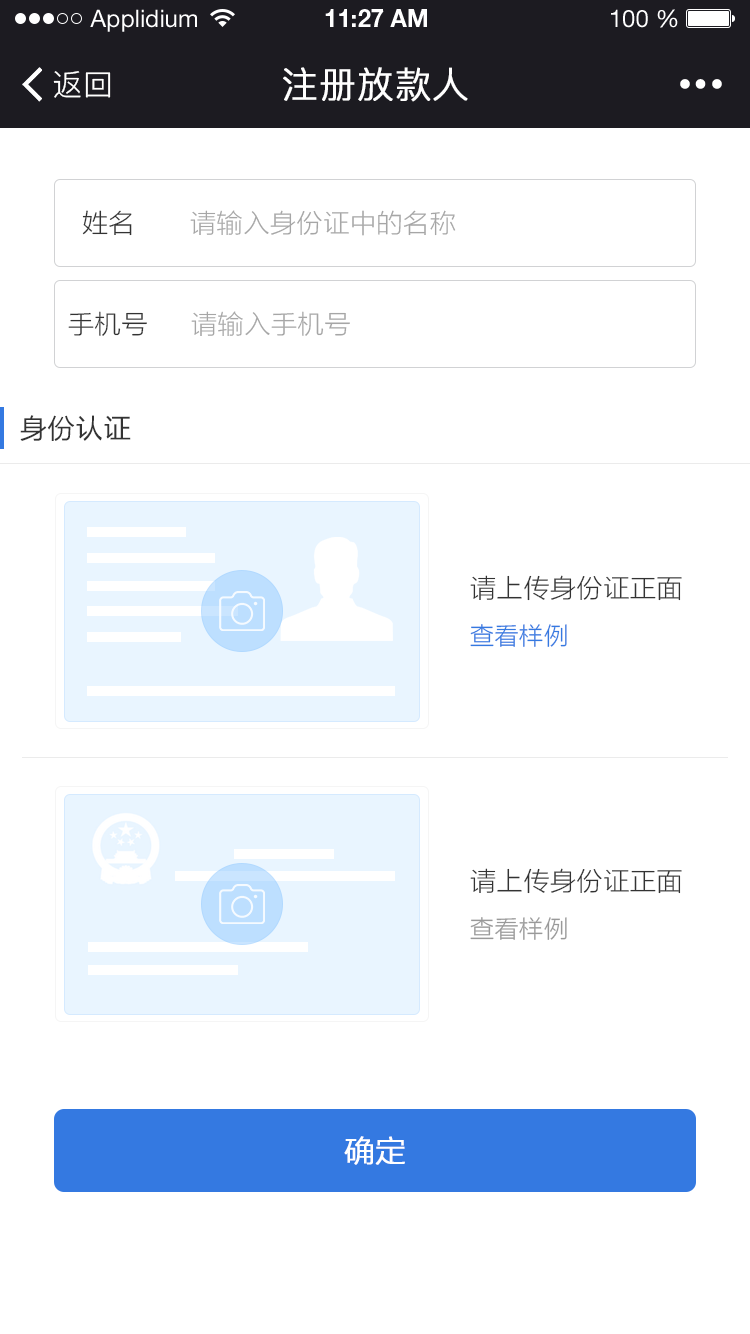
<style>
.page{position:relative;width:750px;height:1334px;background:#ffffff}
.page>*{position:absolute;margin:0}
.t1{font:24px "HelveticaNeueLTStd-Roman";color:#ffffff}
.t2{font:24px "HelveticaNeueLTStd-Bd";color:#ffffff}
.t3{font:30px "PingFang-SC-Regular";letter-spacing:0.025em;color:#ffffff}
.t4{font:36px "PingFang-SC-Regular";letter-spacing:0.025em;color:#ffffff;font-weight:bold}
.t5{font:26px "FZLTXHK--GBK1-0";letter-spacing:0.025em;color:#333333}
.t6{font:26px "FZLTXHK--GBK1-0";letter-spacing:0.025em;color:#a6a6a6}
.t7{font:28px "FZLTH_YS_GBK";color:#333333}
.t8{font:24px "FZLTXHK--GBK1-0";letter-spacing:0.025em;color:#3479e1}
.t9{font:24px "FZLTXHK--GBK1-0";letter-spacing:0.025em;color:#999999}
.t10{font:30px "FZLTXHK--GBK1-0";color:#ffffff;font-weight:bold}
</style>
<div class="page">
<p class="t1" style="left:90px;top:9px;width:107px;height:23px">Applidium</p>
<p class="t2" style="left:325px;top:9px;width:102px;height:18px">11:27 AM</p>
<p class="t1" style="left:611px;top:9px;width:67px;height:19px">100 %</p>
<p class="t3" style="left:53px;top:71px;width:58px;height:27px">返回</p>
<p class="t4" style="left:283px;top:67px;width:185px;height:35px">注册放款人</p>
<p class="t5" style="left:82px;top:210px;width:50px;height:26px">姓名</p>
<p class="t6" style="left:190px;top:210px;width:266px;height:26px">请输入身份证中的名称</p>
<p class="t5" style="left:68px;top:311px;width:79px;height:25px">手机号</p>
<p class="t6" style="left:191px;top:311px;width:159px;height:25px">请输入手机号</p>
<p class="t7" style="left:20px;top:415px;width:111px;height:26px">身份认证</p>
<p class="t5" style="left:470px;top:575px;width:212px;height:26px">请上传身份证正面</p>
<p class="t8" style="left:470px;top:624px;width:97px;height:23px">查看样例</p>
<p class="t5" style="left:470px;top:868px;width:212px;height:26px">请上传身份证正面</p>
<p class="t9" style="left:470px;top:917px;width:97px;height:23px">查看样例</p>
<p class="t10" style="left:344px;top:1136px;width:61px;height:29px">确定</p>
</div>
